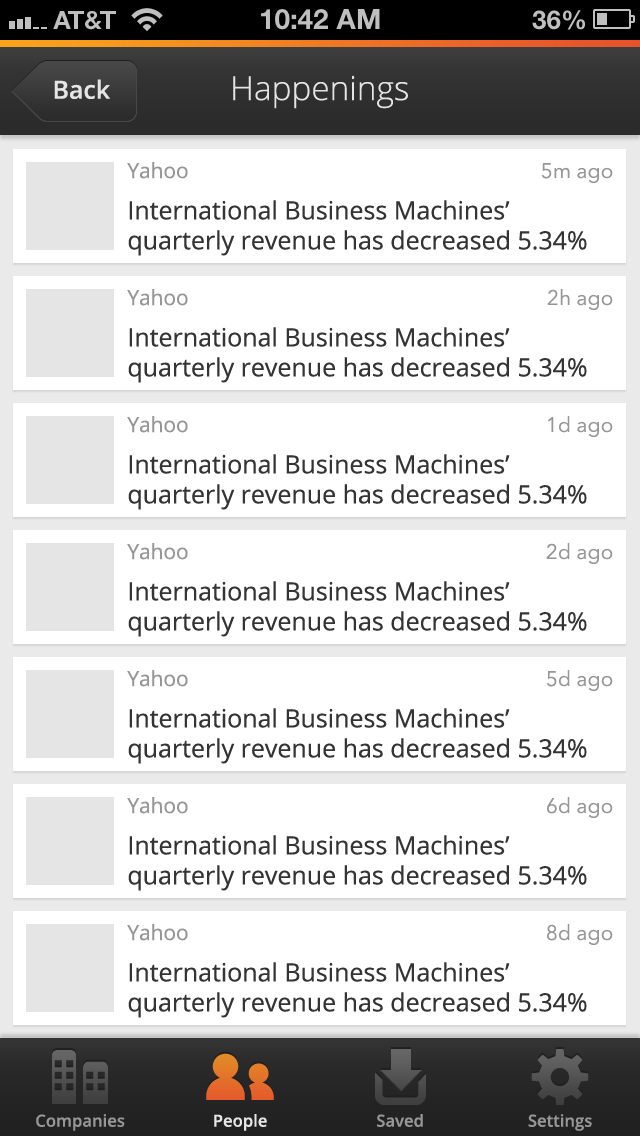
<style>
.page{position:relative;width:640px;height:1136px;background:#ffffff}
.page>*{position:absolute;margin:0}
.t1{font:33.3px "OpenSans-Light";color:#e5e5e5}
.t2{font:25px "OpenSans-Semibold";color:#e5e5e5}
.t3{font:25px "OpenSans";color:#343434}
.t4{font:20.8px "OpenSans";color:#969696}
.t5{font:20.8px "AvenirNext-Regular";color:#969696}
.t6{font:16.7px "OpenSans-Semibold";color:#969696}
.t7{font:16.7px "OpenSans-Semibold";color:#e5e5e5}
</style>
<div class="page">
<p class="t1" style="left:233px;top:75px;width:175px;height:34px">Happenings</p>
<p class="t2" style="left:54px;top:79px;width:57px;height:20px">Back</p>
<p class="t3" style="left:127px;top:162px;width:460px;height:94px"><span class="t4">Yahoo<br></span>International Business Machines’ quarterly revenue has decreased 5.34%</p>
<p class="t5" style="left:541px;top:163px;width:72px;height:20px">5m ago</p>
<p class="t3" style="left:127px;top:289px;width:460px;height:94px"><span class="t4">Yahoo<br></span>International Business Machines’ quarterly revenue has decreased 5.34%</p>
<p class="t5" style="left:547px;top:289px;width:66px;height:21px">2h ago</p>
<p class="t3" style="left:127px;top:416px;width:460px;height:94px"><span class="t4">Yahoo<br></span>International Business Machines’ quarterly revenue has decreased 5.34%</p>
<p class="t5" style="left:548px;top:416px;width:65px;height:21px">1d ago</p>
<p class="t3" style="left:127px;top:543px;width:460px;height:94px"><span class="t4">Yahoo<br></span>International Business Machines’ quarterly revenue has decreased 5.34%</p>
<p class="t5" style="left:546px;top:543px;width:67px;height:21px">2d ago</p>
<p class="t3" style="left:127px;top:670px;width:460px;height:94px"><span class="t4">Yahoo<br></span>International Business Machines’ quarterly revenue has decreased 5.34%</p>
<p class="t5" style="left:546px;top:670px;width:67px;height:21px">5d ago</p>
<p class="t3" style="left:127px;top:797px;width:460px;height:94px"><span class="t4">Yahoo<br></span>International Business Machines’ quarterly revenue has decreased 5.34%</p>
<p class="t5" style="left:547px;top:797px;width:66px;height:21px">6d ago</p>
<p class="t3" style="left:127px;top:924px;width:460px;height:94px"><span class="t4">Yahoo<br></span>International Business Machines’ quarterly revenue has decreased 5.34%</p>
<p class="t5" style="left:547px;top:924px;width:66px;height:21px">8d ago</p>
<p class="t6" style="left:36px;top:1114px;width:89px;height:17px">Companies</p>
<p class="t7" style="left:214px;top:1114px;width:53px;height:17px">People</p>
<p class="t6" style="left:377px;top:1114px;width:46px;height:13px">Saved</p>
<p class="t6" style="left:528px;top:1114px;width:64px;height:17px">Settings</p>
</div>
